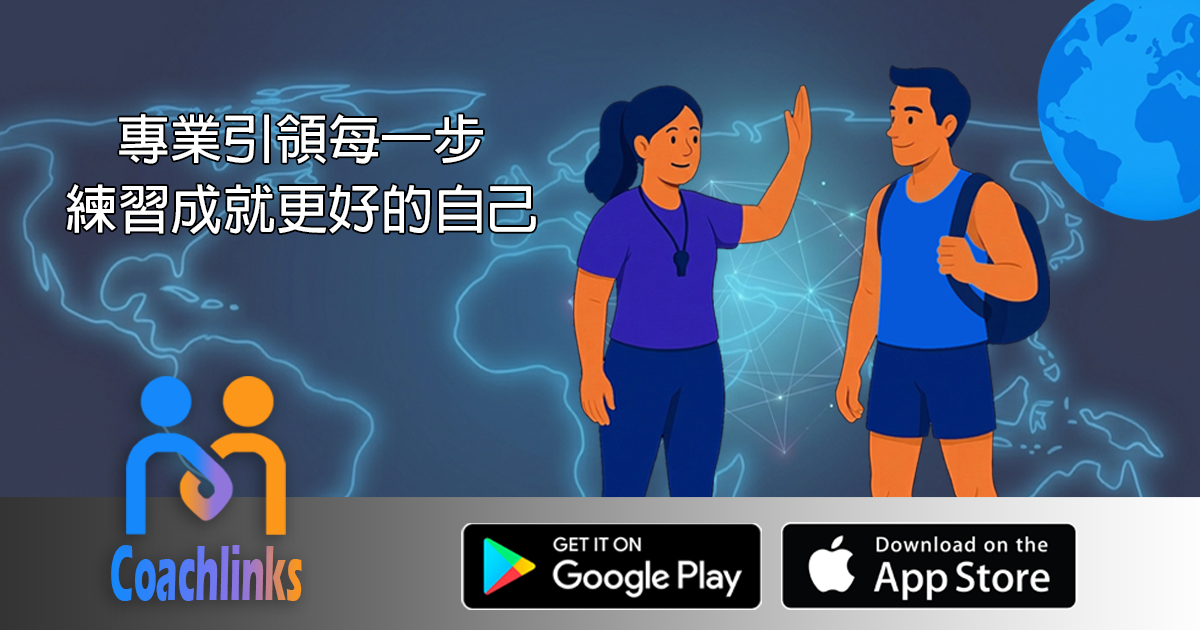
<style>
.page{position:relative;width:1200px;height:630px}
.page>*{position:absolute;margin:0}
.t1{font:52.7px "AdobeFanHeitiStd-Bold";color:#fefefe}
.t2{font:81.3px "ErasITC-Bold";scale:0.43 1}
</style>
<div class="page">
<p class="t1" style="left:119px;top:114px;width:364px;height:50px">專業引領每一步</p>
<p class="t1" style="left:66px;top:184px;width:470px;height:50px">練習成就更好的自己</p>
<p class="t2" style="left:111px;top:545px;width:191px;height:56px">Coachlinks</p>
</div>
